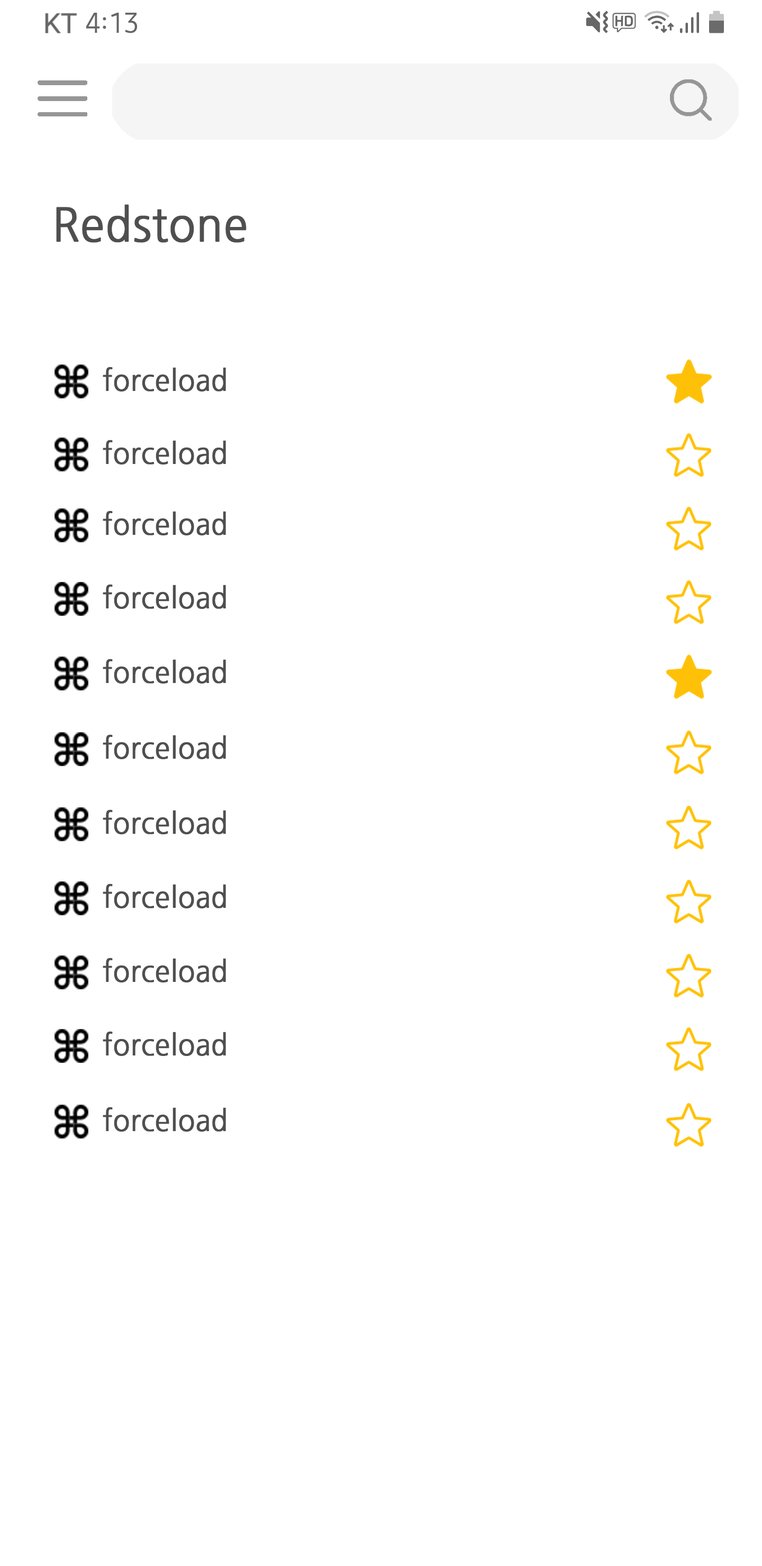
<style>
.page{position:relative;width:762px;height:1566px;background:#ffffff}
.page>*{position:absolute;margin:0}
.t1{font:46px "NanumGothic";color:#4f4f4f;font-weight:bold;scale:0.94 1}
.t2{font:29.1px "NanumGothic";color:#4f4f4f;font-weight:bold;scale:0.94 1}
</style>
<div class="page">
<p class="t1" style="left:56px;top:204px;width:190px;height:39px">Redstone</p>
<p class="t2" style="left:103px;top:367px;width:123px;height:24px">forceload</p>
<p class="t2" style="left:103px;top:440px;width:123px;height:24px">forceload</p>
<p class="t2" style="left:103px;top:510px;width:123px;height:25px">forceload</p>
<p class="t2" style="left:103px;top:584px;width:123px;height:25px">forceload</p>
<p class="t2" style="left:103px;top:659px;width:123px;height:24px">forceload</p>
<p class="t2" style="left:103px;top:734px;width:123px;height:25px">forceload</p>
<p class="t2" style="left:103px;top:809px;width:123px;height:25px">forceload</p>
<p class="t2" style="left:103px;top:883px;width:123px;height:25px">forceload</p>
<p class="t2" style="left:103px;top:957px;width:123px;height:25px">forceload</p>
<p class="t2" style="left:103px;top:1031px;width:123px;height:25px">forceload</p>
<p class="t2" style="left:103px;top:1107px;width:123px;height:24px">forceload</p>
</div>
